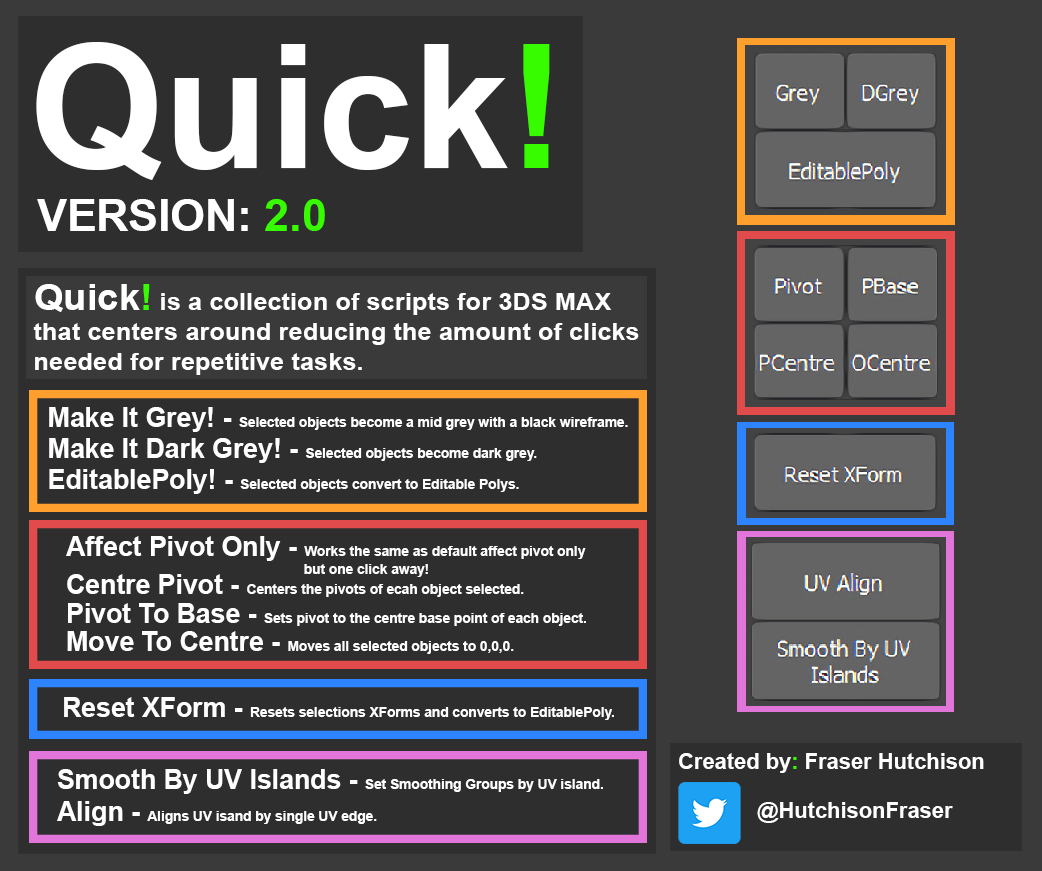
<style>
.page{position:relative;width:1042px;height:871px;background:#2e2e2e}
.page>*{position:absolute;margin:0}
.t1{font:172.5px "Arial-BoldMT";color:#ffffff}
.t2{font:172.5px "Arial-BoldMT";color:#37fc00}
.t3{font:44.5px "Arial-BoldMT";color:#ffffff}
.t4{font:44.5px "Arial-BoldMT";color:#37fc00}
.t5{font:24px/30px "Arial-BoldMT";color:#ffffff;scale:1.06 1}
.t6{font:36px/30px "Arial-BoldMT";color:#ffffff;scale:1.06 1}
.t7{font:36px/30px "Arial-BoldMT";color:#37fc00;scale:1.06 1}
.t8{font:14px "Arial-BoldMT";color:#ffffff}
.t9{font:27.2px "Arial-BoldMT";color:#ffffff}
.t10{font:14px/17.9px "Arial-BoldMT";color:#ffffff}
.t11{font:27.2px/17.9px "Arial-BoldMT";color:#ffffff}
.t12{font:22px "Arial-BoldMT";color:#ffffff}
.t13{font:22px "Arial-BoldMT";color:#37fc00}
.t14{font:14.1px "Arial-BoldMT";color:#ffffff;scale:0.97 1}
.t15{font:27.5px "Arial-BoldMT";color:#ffffff;scale:0.97 1}
</style>
<div class="page">
<p class="t1" style="left:36px;top:42px;width:514px;height:138px">Quick<span class="t2">!</span></p>
<p class="t3" style="left:37px;top:199px;width:288px;height:32px">VERSION: <span class="t4">2.0</span></p>
<p class="t5" style="left:33px;top:284px;width:606px;height:91px"><span class="t6">Quick</span><span class="t7">!</span> is a collection of scripts for 3DS MAX <br>that centers around reducing the amount of clicks <br>needed for repetitive tasks.</p>
<p class="t8" style="left:49px;top:407px;width:579px;height:25px"><span class="t9">Make It Grey! - </span>Selected objects become a mid grey with a black wireframe.</p>
<p class="t8" style="left:49px;top:438px;width:488px;height:25px"><span class="t9">Make It Dark Grey! - </span>Selected objects become dark grey.</p>
<p class="t8" style="left:49px;top:469px;width:470px;height:25px"><span class="t9">EditablePoly! - </span>Selected objects convert to Editable Polys.</p>
<p class="t10" style="left:66px;top:536px;width:520px;height:41px"><span class="t11">Affect Pivot Only - </span>Works the same as default affect pivot only<br>             but one click away!</p>
<p class="t8" style="left:67px;top:574px;width:457px;height:23px"><span class="t9">Centre Pivot - </span>Centers the pivots of ecah object selected.</p>
<p class="t8" style="left:68px;top:603px;width:518px;height:23px"><span class="t9">Pivot To Base - </span>Sets pivot to the centre base point of each object.</p>
<p class="t8" style="left:67px;top:631px;width:447px;height:23px"><span class="t9">Move To Centre - </span>Moves all selected objects to 0,0,0.</p>
<p class="t8" style="left:64px;top:697px;width:550px;height:23px"><span class="t9">Reset XForm - </span>Resets selections XForms and converts to EditablePoly.</p>
<p class="t12" style="left:679px;top:753px;width:305px;height:20px">Created by<span class="t13">:</span> Fraser Hutchison</p>
<p class="t14" style="left:57px;top:769px;width:546px;height:25px"><span class="t15">Smooth By UV Islands - </span>Set Smoothing Groups by UV island.</p>
<p class="t14" style="left:57px;top:801px;width:320px;height:25px"><span class="t15">Align - </span>Aligns UV isand by single UV edge.</p>
<p class="t12" style="left:757px;top:802px;width:196px;height:21px">@HutchisonFraser</p>
</div>
